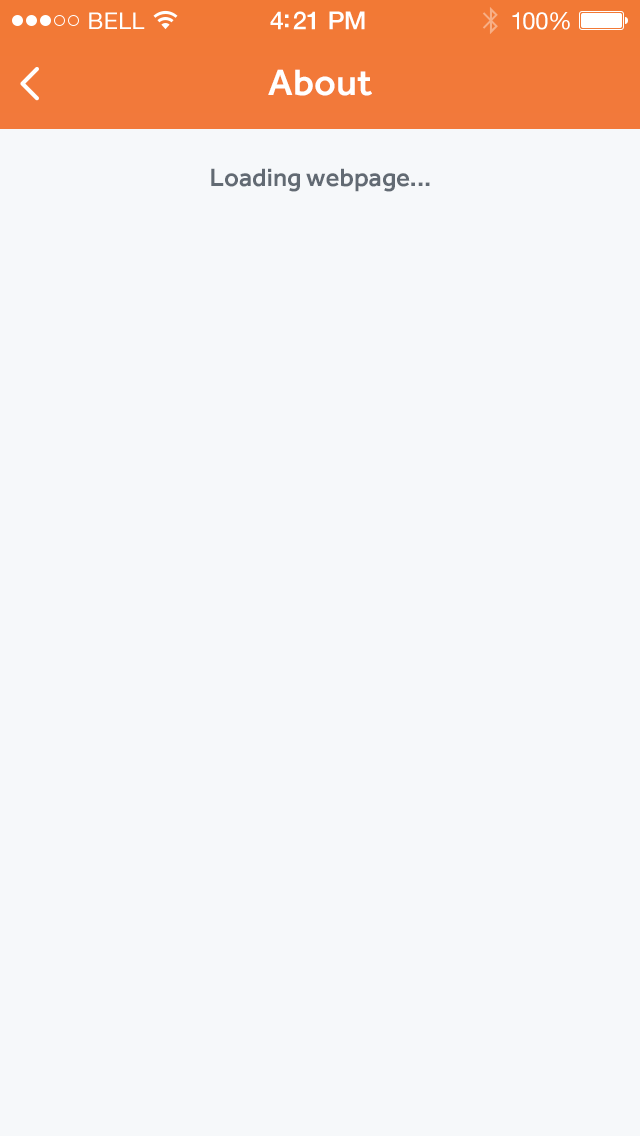
<style>
.page{position:relative;width:640px;height:1136px;background:#f6f8fa}
.page>*{position:absolute;margin:0}
.t1{font:23px "HelveticaNeue";letter-spacing:0.02em;color:#ffffff}
.t2{font:25px "HelveticaNeue-Medium";letter-spacing:-0.02em;color:#ffffff}
.t3{font:24px "HelveticaNeue";letter-spacing:-0.02em;color:#ffffff}
.t4{font:38px "Effra-Medium";color:#ffffff}
.t5{font:26px "Effra-Medium";color:#626a73}
</style>
<div class="page">
<p class="t1" style="left:89px;top:12px;width:56px;height:17px">BELL</p>
<p class="t2" style="left:270px;top:11px;width:95px;height:19px">4:21 PM</p>
<p class="t3" style="left:512px;top:12px;width:58px;height:18px">100%</p>
<p class="t4" style="left:268px;top:69px;width:104px;height:27px">About</p>
<p class="t5" style="left:211px;top:168px;width:219px;height:24px">Loading webpage...</p>
</div>
